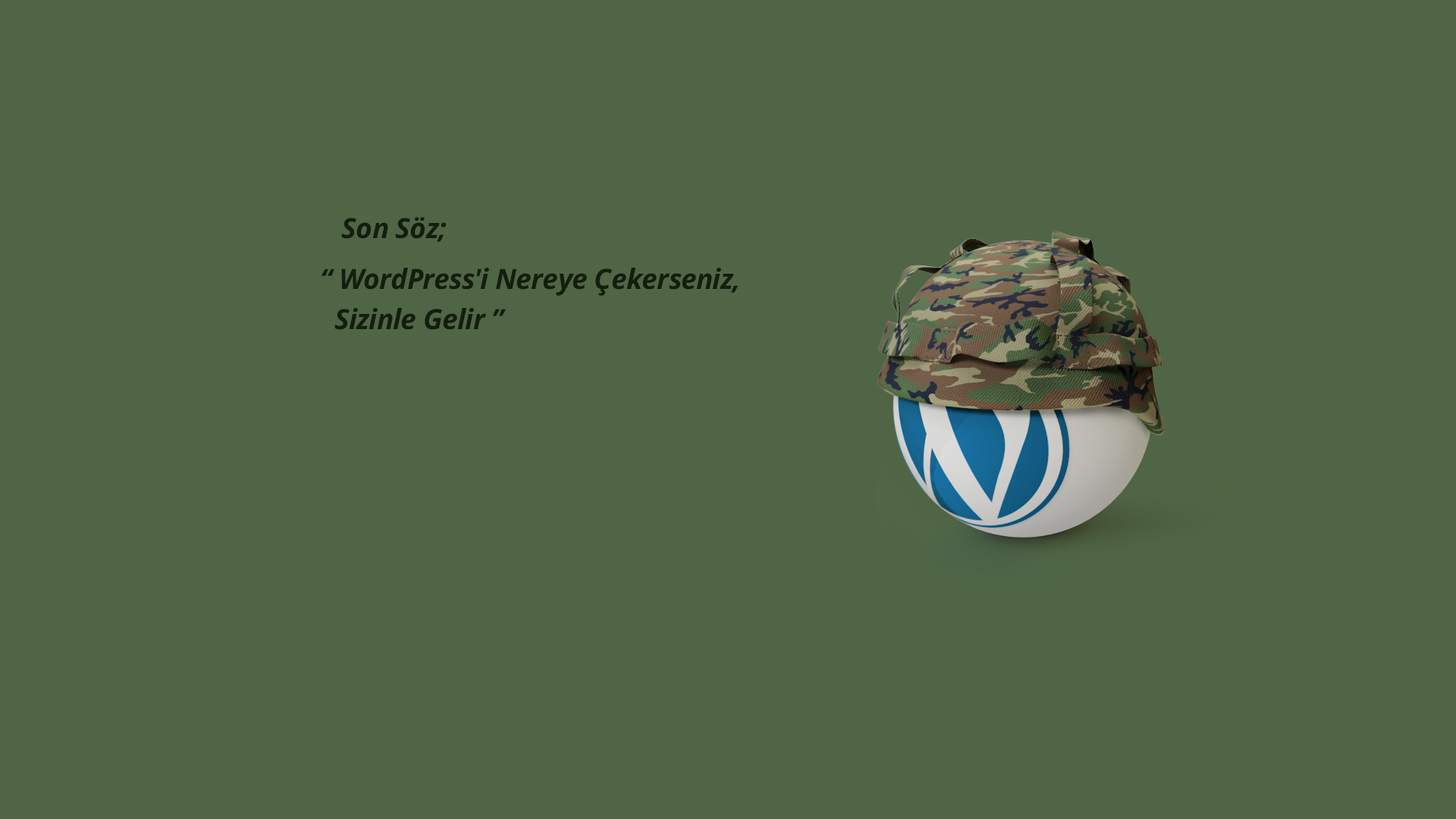
<style>
.page{position:relative;width:1456px;height:819px;background:#506545}
.page>*{position:absolute;margin:0}
.t1{font:27.9px "OpenSans-BoldItalic";letter-spacing:-0.02em;color:#131e0e}
.t2{font:27.9px/40.2px "OpenSans-BoldItalic";letter-spacing:-0.02em;color:#131e0e}
</style>
<div class="page">
<p class="t1" style="left:341px;top:217px;width:106px;height:25px">Son Söz;</p>
<p class="t2" style="left:322px;top:268px;width:416px;height:62px">“ WordPress'i Nereye Çekerseniz, <br>  Sizinle Gelir ”</p>
</div>
